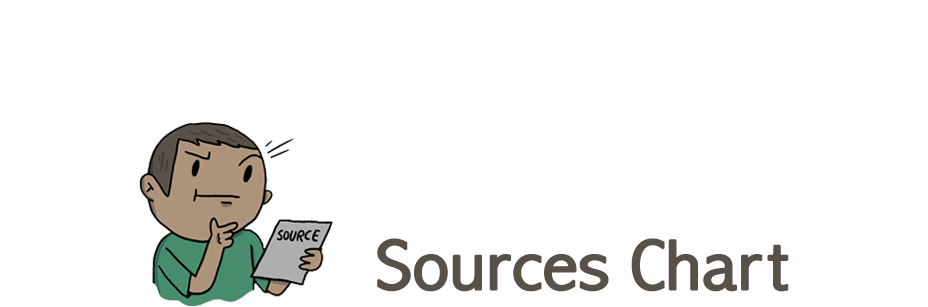
<style>
.page{position:relative;width:928px;height:307px;background:#ffffff}
.page>*{position:absolute;margin:0}
.t1{font:71.8px "AbadiMT-CondensedLight";letter-spacing:-0.025em;color:#595048;font-weight:bold;scale:1.21 1}
</style>
<div class="page">
<p class="t1" style="left:377px;top:238px;width:412px;height:54px">Sources Chart</p>
</div>
